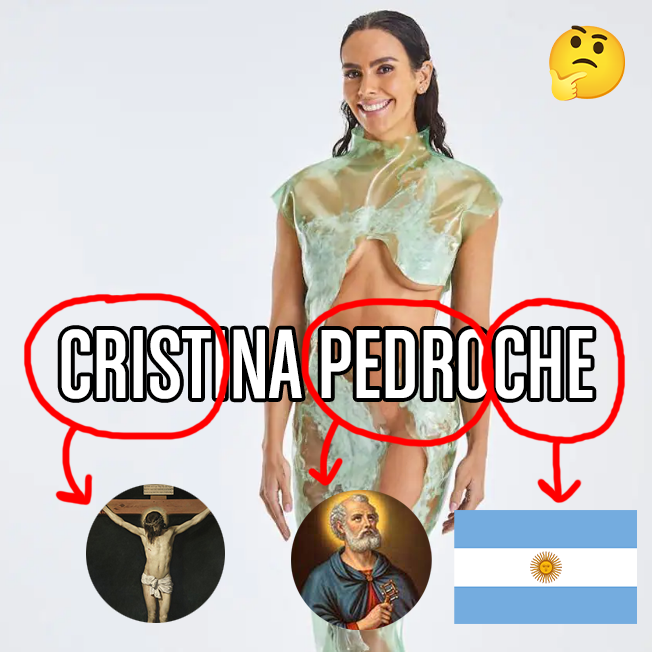
<style>
.page{position:relative;width:652px;height:652px}
.page>*{position:absolute;margin:0}
.t1{font:104.4px "ChaletComprime-CologneEighty";color:#ffffff}
</style>
<div class="page">
<p class="t1" style="left:61px;top:329px;width:532px;height:70px">CRISTINA PEDROCHE</p>
</div>
